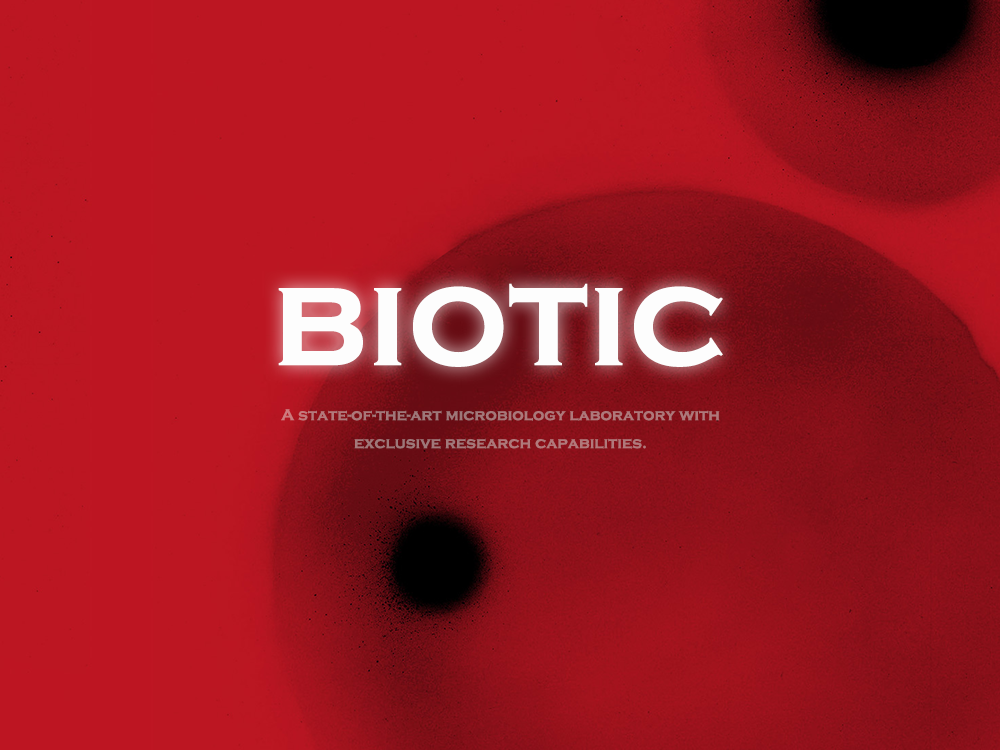
<style>
.page{position:relative;width:1000px;height:750px;background:#bc1622}
.page>*{position:absolute;margin:0}
.t1{font:140.7px "CopperplateGothic-Bold";color:#fdfdfd}
.t2{font:16px "CopperplateGothic-Bold";color:#ac787a}
</style>
<div class="page">
<p class="t1" style="left:278px;top:283px;width:445px;height:84px">biotic</p>
<p class="t2" style="left:281px;top:409px;width:439px;height:40px;text-align:center">A state-of-the-art microbiology laboratory with exclusive research capabilities.</p>
</div>
